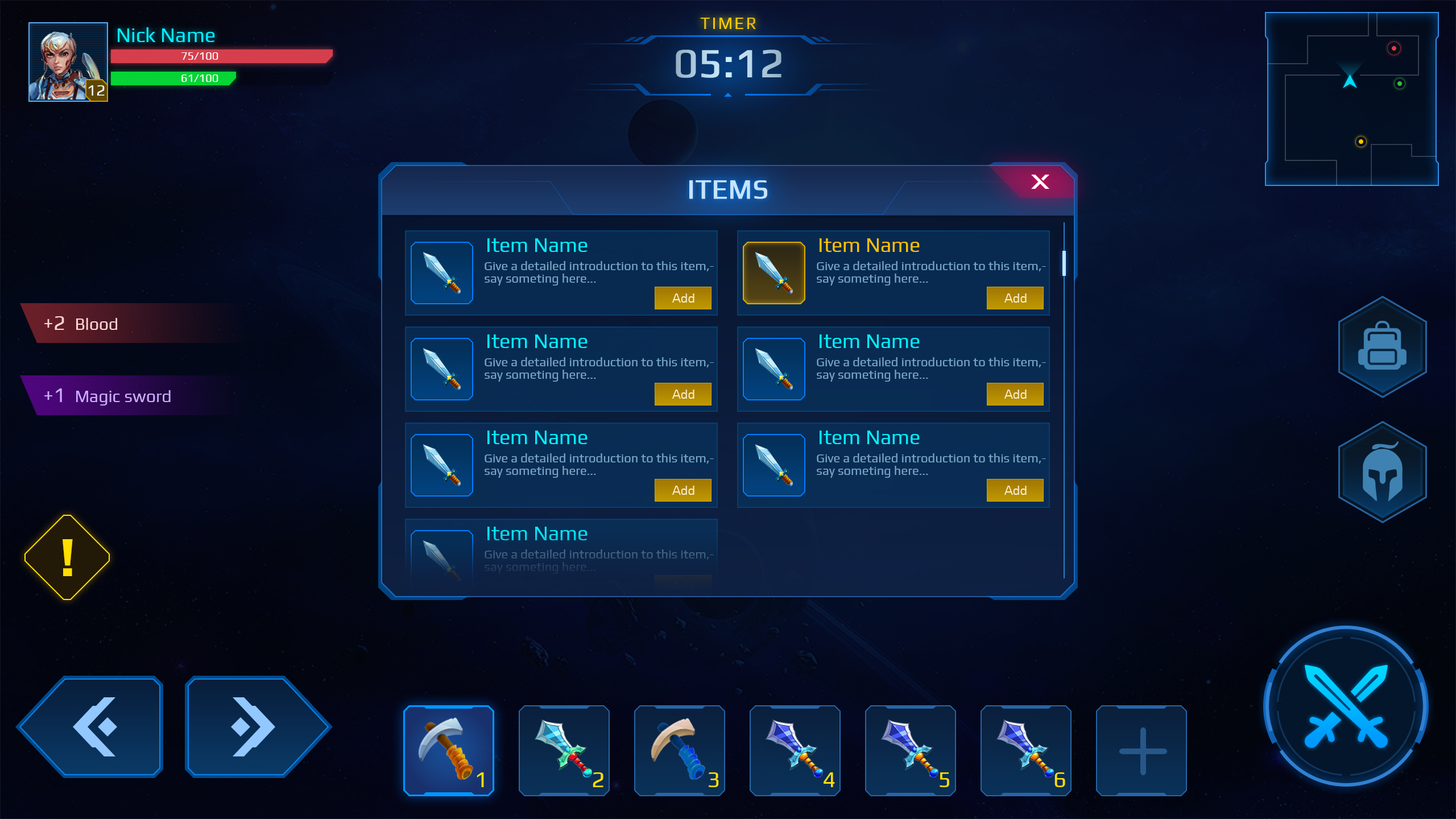
<style>
.page{position:relative;width:1456px;height:819px}
.page>*{position:absolute;margin:0}
.t1{font:17.1px "Play-Regular";letter-spacing:0.1em;color:#f1c803}
.t2{font:20.5px "Play-Regular";color:#00f0ff}
.t3{font:11.4px "Play-Regular";color:#ffffff}
.t4{font:40.9px "Play-Regular";font-weight:bold}
.t5{font:15.9px "Play-Regular";color:#ffffff}
.t6{font:27.3px "Play-Regular";color:#ccecff;font-weight:bold}
.t7{font:20.5px "Play-Regular";color:#ffc000}
.t8{font:12.5px/12.5px "Play-Regular";color:#77a7c7}
.t9{font:12.5px "Square721BT-Roman";color:#fbf1cc}
.t10{font:17.1px "Play-Regular";color:#ffd4d4}
.t11{font:20.5px "Play-Regular";color:#ffd4d4}
.t12{font:17.1px "Play-Regular";color:#cdacff}
.t13{font:20.5px "Play-Regular";color:#cdacff}
.t14{font:56.9px "Play-Bold";color:#ffde00}
.t15{font:12.5px/12.5px "Play-Regular"}
.t16{font:12.5px "Square721BT-Roman";color:#132444}
.t17{font:22.7px "Play-Regular";color:#ffde00}
</style>
<div class="page">
<p class="t1" style="left:700px;top:18px;width:56px;height:11px">TIMER</p>
<p class="t2" style="left:118px;top:27px;width:97px;height:15px">Nick Name</p>
<p class="t3" style="left:181px;top:52px;width:37px;height:8px">75/100</p>
<p class="t4" style="left:676px;top:49px;width:105px;height:29px">05:12</p>
<p class="t3" style="left:181px;top:75px;width:37px;height:7px">61/100</p>
<p class="t5" style="left:88px;top:85px;width:17px;height:11px">12</p>
<p class="t6" style="left:689px;top:180px;width:78px;height:19px">ITEMS</p>
<p class="t2" style="left:487px;top:238px;width:101px;height:14px">Item Name</p>
<p class="t7" style="left:820px;top:238px;width:100px;height:14px">Item Name</p>
<p class="t8" style="left:485px;top:261px;width:229px;height:25px">Give a detailed introduction to this item,say someting here...</p>
<p class="t8" style="left:817px;top:261px;width:229px;height:25px">Give a detailed introduction to this item,say someting here...</p>
<p class="t9" style="left:672px;top:293px;width:22px;height:10px">Add</p>
<p class="t9" style="left:1004px;top:293px;width:23px;height:10px">Add</p>
<p class="t10" style="left:44px;top:316px;width:73px;height:14px"><span class="t11">+2  </span>Blood</p>
<p class="t2" style="left:487px;top:334px;width:101px;height:14px">Item Name</p>
<p class="t2" style="left:820px;top:334px;width:100px;height:14px">Item Name</p>
<p class="t8" style="left:485px;top:357px;width:229px;height:25px">Give a detailed introduction to this item,say someting here...</p>
<p class="t8" style="left:817px;top:357px;width:229px;height:25px">Give a detailed introduction to this item,say someting here...</p>
<p class="t12" style="left:44px;top:388px;width:127px;height:18px"><span class="t13">+1  </span>Magic sword</p>
<p class="t9" style="left:672px;top:390px;width:22px;height:9px">Add</p>
<p class="t9" style="left:1004px;top:390px;width:23px;height:9px">Add</p>
<p class="t2" style="left:487px;top:431px;width:101px;height:13px">Item Name</p>
<p class="t2" style="left:820px;top:431px;width:100px;height:13px">Item Name</p>
<p class="t8" style="left:485px;top:453px;width:229px;height:25px">Give a detailed introduction to this item,say someting here...</p>
<p class="t8" style="left:817px;top:453px;width:229px;height:25px">Give a detailed introduction to this item,say someting here...</p>
<p class="t9" style="left:672px;top:486px;width:22px;height:9px">Add</p>
<p class="t9" style="left:1004px;top:486px;width:23px;height:9px">Add</p>
<p class="t2" style="left:487px;top:527px;width:101px;height:13px">Item Name</p>
<p class="t14" style="left:63px;top:539px;width:10px;height:37px">!</p>
<p class="t15" style="left:485px;top:549px;width:229px;height:25px">Give a detailed introduction to this item,say someting here...</p>
<p class="t16" style="left:672px;top:582px;width:22px;height:9px">Add</p>
<p class="t17" style="left:477px;top:772px;width:7px;height:15px">1</p>
<p class="t17" style="left:593px;top:772px;width:10px;height:15px">2</p>
<p class="t17" style="left:709px;top:772px;width:10px;height:15px">3</p>
<p class="t17" style="left:824px;top:772px;width:11px;height:15px">4</p>
<p class="t17" style="left:940px;top:772px;width:9px;height:15px">5</p>
<p class="t17" style="left:1054px;top:772px;width:11px;height:15px">6</p>
</div>
